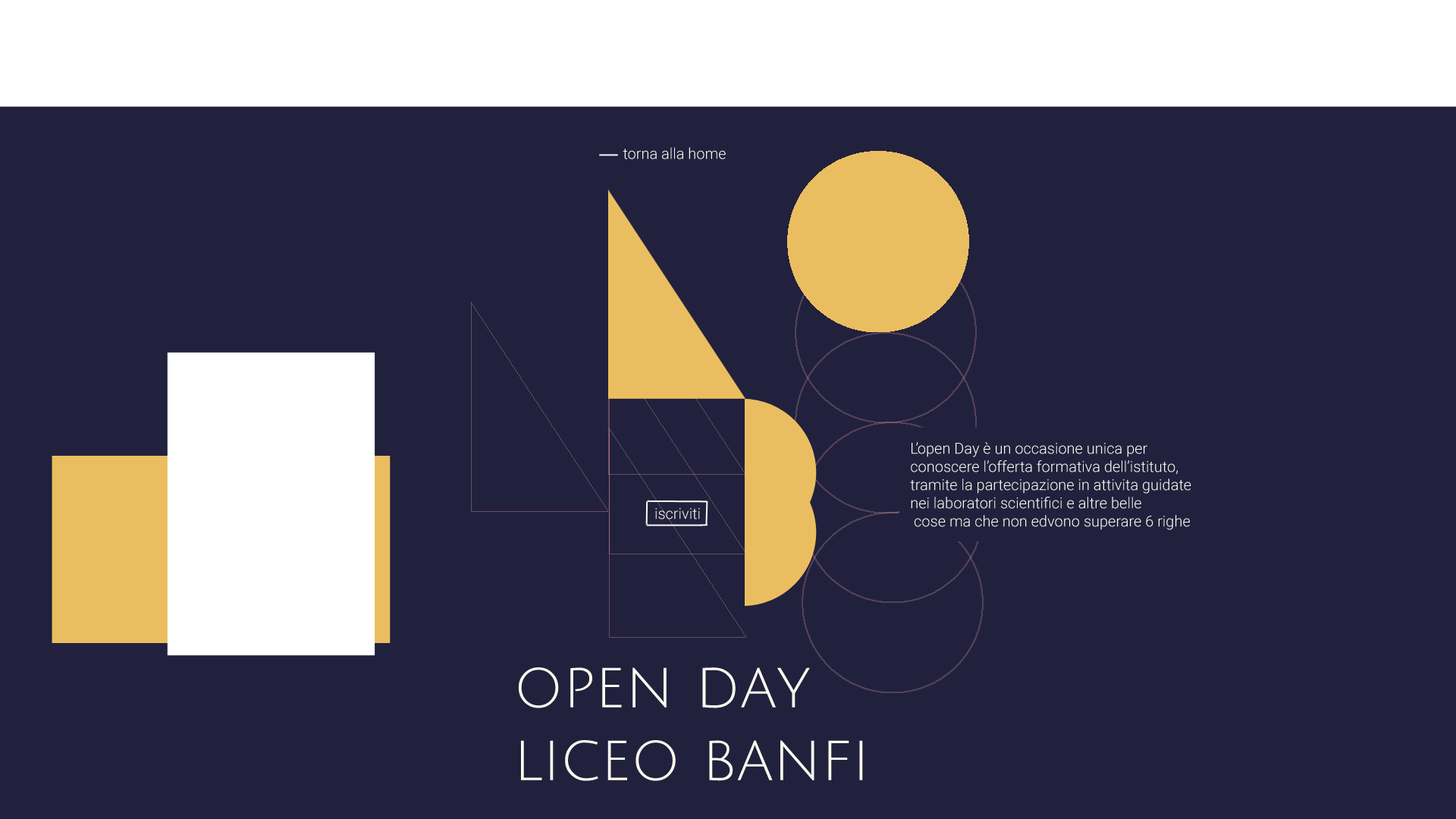
<style>
.page{position:relative;width:1456px;height:819px;background:#21213e}
.page>*{position:absolute;margin:0}
.t1{font:15.2px "Roboto-Light";color:#fff9ed}
.t2{font:60.7px "JuliusSansOne-Regular";color:#fff9ed}
</style>
<div class="page">
<p class="t1" style="left:623px;top:147px;width:103px;height:12px">torna alla home</p>
<p class="t1" style="left:910px;top:442px;width:281px;height:88px">L’open Day è un occasione unica per<br>conoscere l’offerta formativa dell’istituto,<br>tramite la partecipazione in attivita guidate<br>nei laboratori scientifici e altre belle<br> cose ma che non edvono superare 6 righe</p>
<p class="t1" style="left:655px;top:508px;width:45px;height:11px">iscriviti</p>
<p class="t2" style="left:519px;top:667px;width:344px;height:114px">open day<br>liceo banfi</p>
</div>
